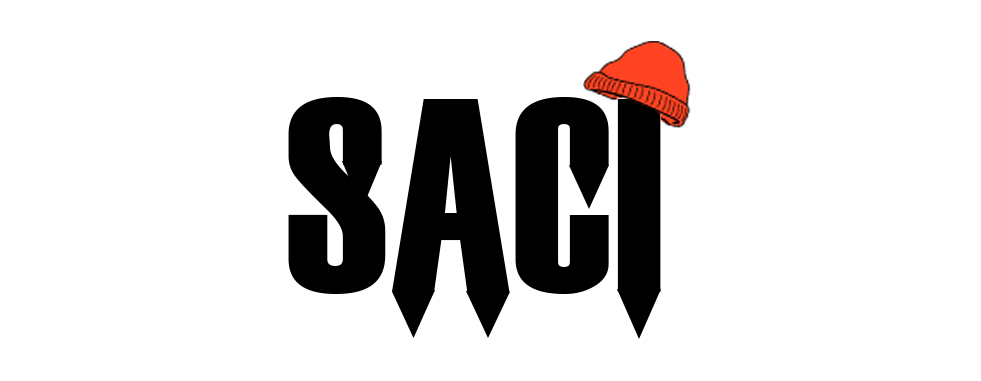
<style>
.page{position:relative;width:981px;height:381px;background:#ffffff}
.page>*{position:absolute;margin:0}
.t1{font:276.1px "Haettenschweiler";color:#000000}
</style>
<div class="page">
<p class="t1" style="left:288px;top:97px;width:373px;height:197px">SACI</p>
</div>
